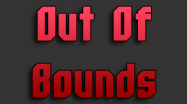
<style>
.page{position:relative;width:187px;height:104px;background:#333333}
.page>*{position:absolute;margin:0}
.t1{font:47.9px "Whitestone-Bold"}
</style>
<div class="page">
<p class="t1" style="left:32px;top:6px;width:124px;height:92px;text-align:center">Out Of<br>Bounds</p>
</div>
